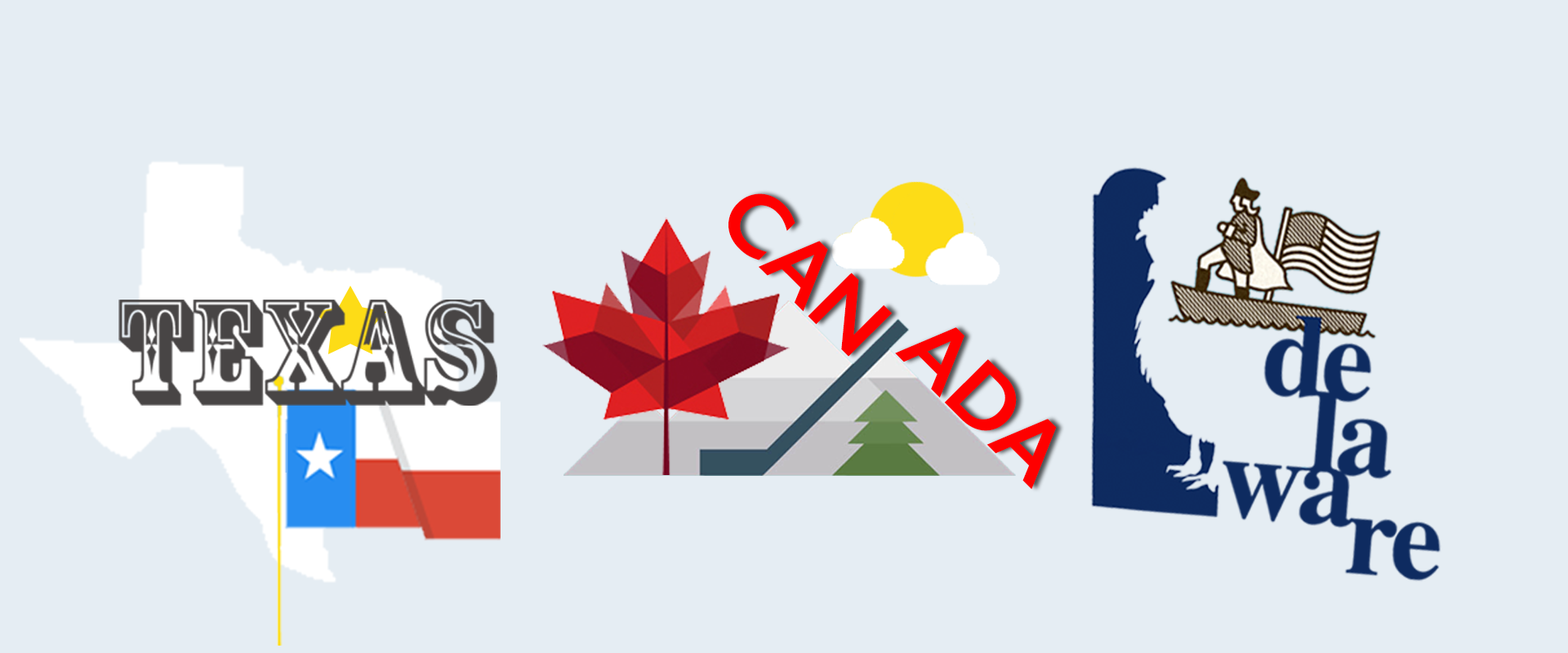
<style>
.page{position:relative;width:1568px;height:653px;background:#e5edf3}
.page>*{position:absolute;margin:0}
.t1{font:89.4px "GillSans-SemiBold";color:#fe0000}
.t2{font:140.5px "RosewoodStd-Regular";color:#484545}
</style>
<div class="page">
<p class="t1" style="left:728px;top:194px;width:164px;height:163px;rotate:45deg">CAN</p>
<p class="t2" style="left:118px;top:300px;width:379px;height:106px">texas</p>
<p class="t1" style="left:895px;top:327px;width:162px;height:163px;rotate:45deg">ADA</p>
</div>
